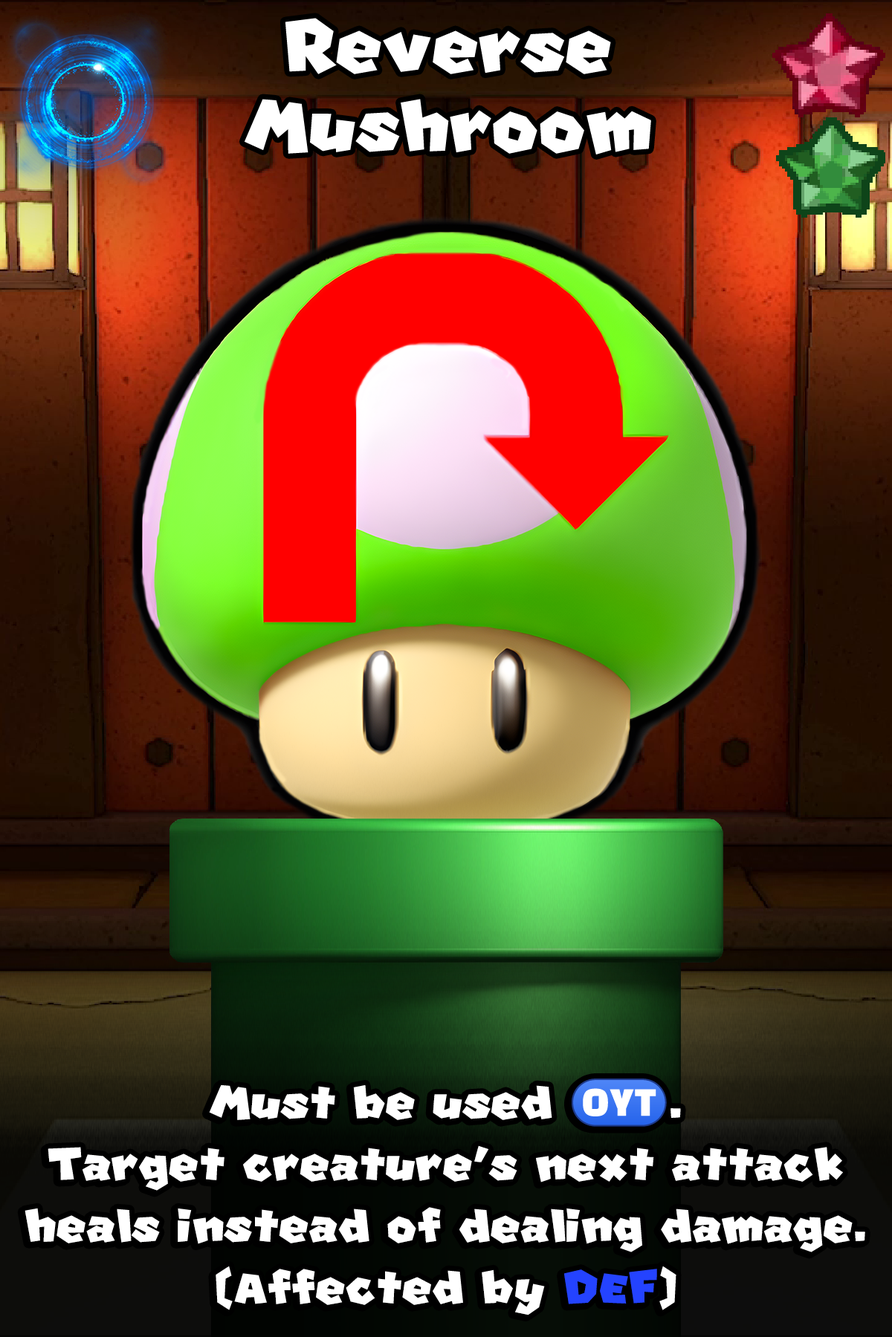
<style>
.page{position:relative;width:892px;height:1337px}
.page>*{position:absolute;margin:0}
.t1{font:170.9px/79.5px "SuperMario";color:#ffffff}
.t2{font:109.2px/61.7px "SuperMario";color:#ffffff}
.t3{font:48.8px/61.7px "stoogedings-Regular";color:#ffffff;font-weight:bold}
.t4{font:109.2px/61.7px "SuperMario";color:#2443ff}
</style>
<div class="page">
<p class="t1" style="left:244px;top:18px;width:407px;height:137px;text-align:center">Reverse<br>Mushroom</p>
<p class="t2" style="left:25px;top:1079px;width:840px;height:236px;text-align:center">Must be used <span class="t3">(OYT)</span>.<br>Target creature's next attack heals instead of dealing damage. <br>(Affected by <span class="t4">DEF</span>)</p>
</div>
